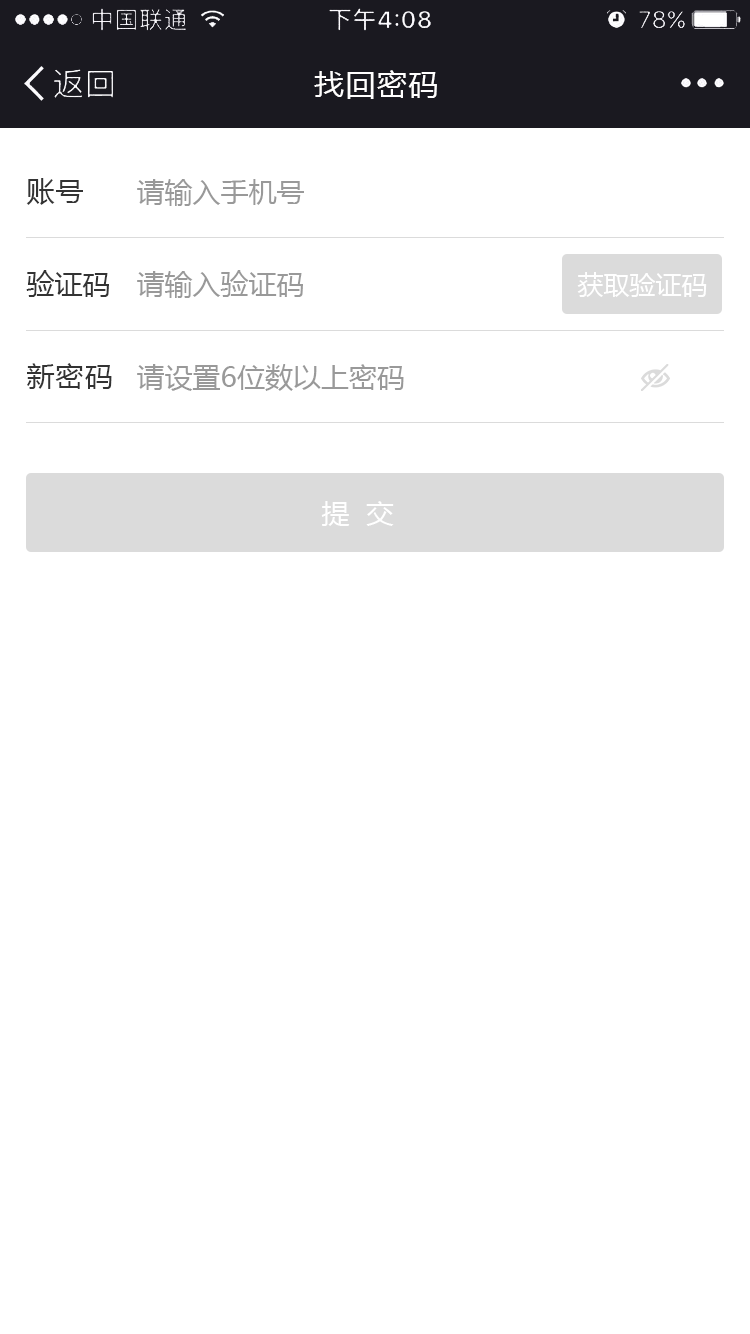
<style>
.page{position:relative;width:750px;height:1334px;background:#ffffff}
.page>*{position:absolute;margin:0}
.t1{font:30px "MicrosoftYaHei";letter-spacing:0.05em;color:#fffefe}
.t2{font:28px "MicrosoftYaHei";letter-spacing:0.05em;color:#333333}
.t3{font:28px "MicrosoftYaHei";color:#999999}
.t4{font:28px "MicrosoftYaHei";color:#333333}
.t5{font:26px "MicrosoftYaHei";color:#ffffff}
.t6{font:28px "MicrosoftYaHei";color:#ffffff}
</style>
<div class="page">
<p class="t1" style="left:314px;top:70px;width:123px;height:29px">找回密码</p>
<p class="t2" style="left:26px;top:178px;width:57px;height:27px">账号</p>
<p class="t3" style="left:137px;top:179px;width:167px;height:27px">请输入手机号</p>
<p class="t4" style="left:26px;top:270px;width:83px;height:27px">验证码</p>
<p class="t3" style="left:137px;top:270px;width:166px;height:28px">请输入验证码</p>
<p class="t5" style="left:577px;top:272px;width:130px;height:25px">获取验证码</p>
<p class="t2" style="left:27px;top:363px;width:85px;height:26px">新密码</p>
<p class="t3" style="left:137px;top:364px;width:267px;height:27px">请设置6位数以上密码</p>
<p class="t6" style="left:321px;top:501px;width:73px;height:25px">提  交</p>
</div>
